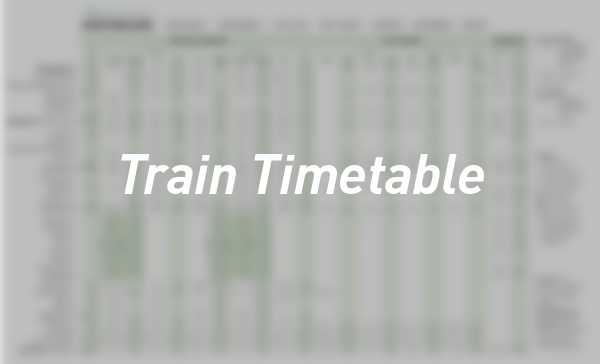
<style>
.page{position:relative;width:600px;height:364px}
.page>*{position:absolute;margin:0}
.t1{font:55.3px "DIN-BoldItalic";letter-spacing:-0.01em;color:#ffffff}
</style>
<div class="page">
<p class="t1" style="left:121px;top:154px;width:363px;height:40px">Train Timetable</p>
</div>
